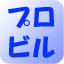
<style>
.page{position:relative;width:64px;height:64px}
.page>*{position:absolute;margin:0}
.t1{font:25px/30px "HGSSoeiKakupoptai";color:#0633f7}
</style>
<div class="page">
<p class="t1" style="left:8px;top:6px;width:47px;height:52px;text-align:right">プロ<br>ビル</p>
</div>
